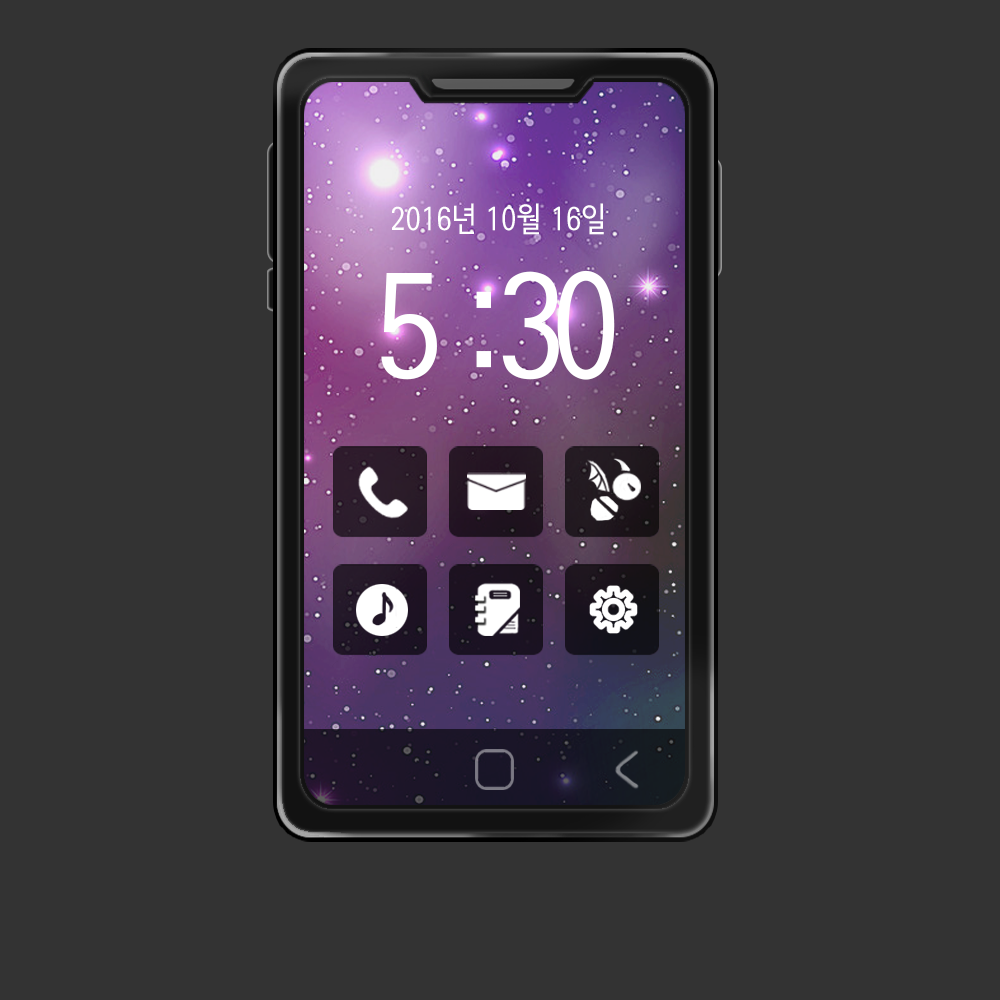
<style>
.page{position:relative;width:1000px;height:1000px;background:#333333}
.page>*{position:absolute;margin:0}
.t1{font:33px "SeN-CM";color:#ffffff;scale:0.96 1}
.t2{font:150px "SeN-CM";letter-spacing:-0.1em;color:#ffffff;scale:0.95 1}
</style>
<div class="page">
<p class="t1" style="left:392px;top:203px;width:212px;height:32px">2016년 10월 16일</p>
<p class="t2" style="left:381px;top:270px;width:234px;height:110px">5 :30</p>
</div>
